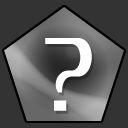
<style>
.page{position:relative;width:128px;height:128px;background:#333333}
.page>*{position:absolute;margin:0}
.t1{font:90px "Unispace-Regular";color:#ffffff;font-weight:bold}
</style>
<div class="page">
<p class="t1" style="left:45px;top:38px;width:47px;height:73px">?</p>
</div>
